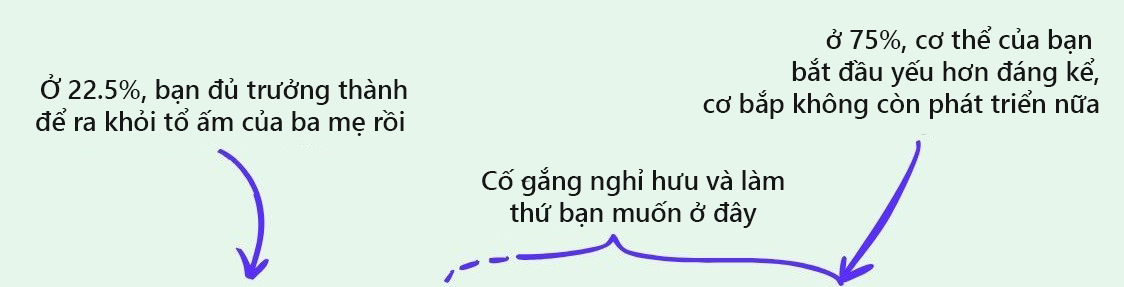
<style>
.page{position:relative;width:1124px;height:287px;background:#e6f6eb}
.page>*{position:absolute;margin:0}
.t1{font:26.7px "SegoeUI-Semibold";color:#161617}
</style>
<div class="page">
<p class="t1" style="left:703px;top:26px;width:396px;height:93px;text-align:right">ở 75%, cơ thể của bạn <br>bắt đầu yếu hơn đáng kể,<br>cơ bắp không còn phát triển nữa</p>
<p class="t1" style="left:36px;top:74px;width:371px;height:62px;text-align:center">Ở 22.5%, bạn đủ trưởng thành<br>để ra khỏi tổ ấm của ba mẹ rồi</p>
<p class="t1" style="left:482px;top:167px;width:302px;height:61px;text-align:center">Cố gắng nghỉ hưu và làm<br>thứ bạn muốn ở đây</p>
</div>
